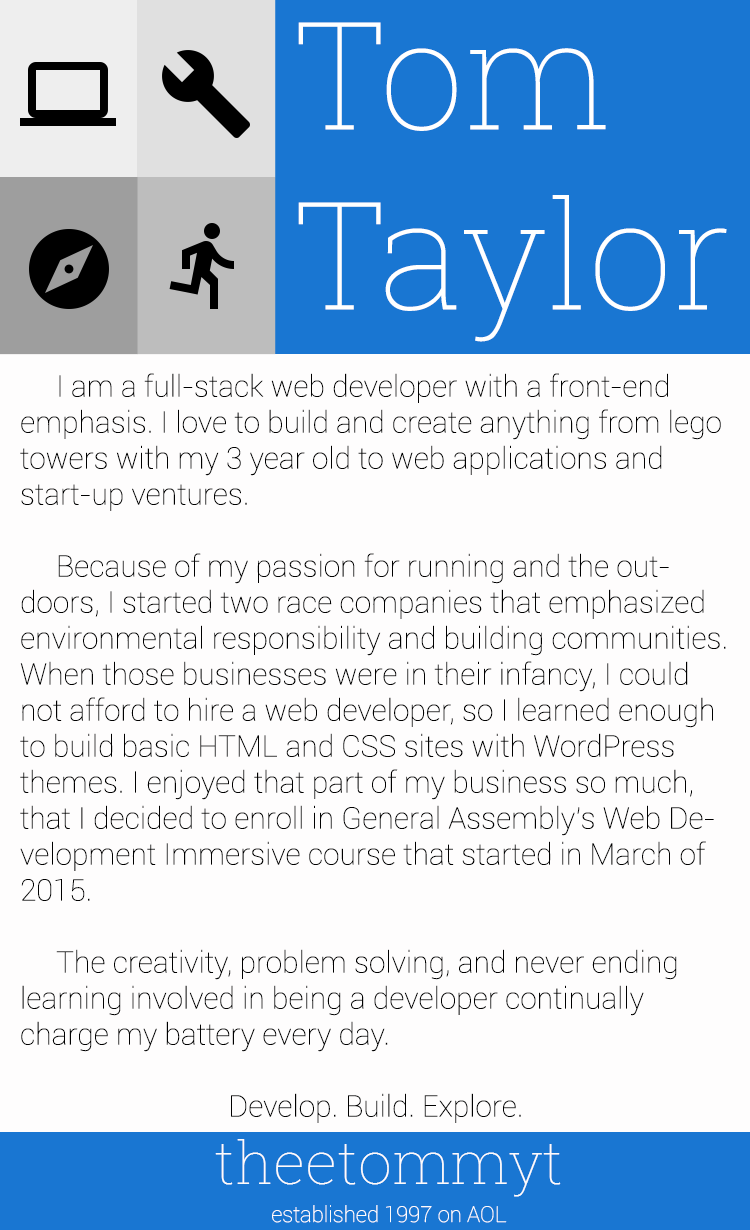
<style>
.page{position:relative;width:750px;height:1230px;background:#fefdfd}
.page>*{position:absolute;margin:0}
.t1{font:150px "RobotoSlab-Thin";color:#ffffff}
.t2{font:30px "Roboto-Thin";color:#000000}
.t3{font:22px "Roboto-Thin";color:#fefcfc}
.t4{font:60px "RobotoSlab-Thin";color:#fefcfc}
</style>
<div class="page">
<p class="t1" style="left:298px;top:22px;width:429px;height:320px">Tom<br>Taylor</p>
<p class="t2" style="left:20px;top:373px;width:706px;height:750px">I am a full-stack web developer with a front-end emphasis. I love to build and create anything from lego towers with my 3 year old to web applications and start-up ventures. <br><br> Because of my passion for running and the outdoors, I started two race companies that emphasized environmental responsibility and building communities. When those businesses were in their infancy, I could not afford to hire a web developer, so I learned enough to build basic HTML and CSS sites with WordPress themes. I enjoyed that part of my business so much, that I decided to enroll in General Assembly's Web Development Immersive course that started in March of 2015. <br><br> The creativity, problem solving, and never ending learning involved in being a developer continually charge my battery every day.<br><br>Develop. Build. Explore.</p>
<p class="t3" style="left:215px;top:1139px;width:346px;height:84px;text-align:center"><span class="t4">theetommyt<br><br></span>established 1997 on AOL</p>
</div>
